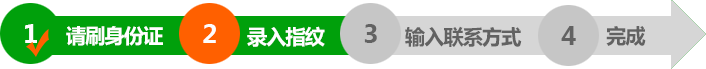
<style>
.page{position:relative;width:706px;height:69px;background:#ffffff}
.page>*{position:absolute;margin:0}
.t1{font:25px "MicrosoftYaHei-Bold";letter-spacing:-0.05em;color:#ffffff;text-transform:uppercase}
.t2{font:20.5px "MicrosoftYaHei-Bold";letter-spacing:-0.05em;color:#ffffff;text-transform:uppercase}
.t3{font:25px "MicrosoftYaHei-Bold";letter-spacing:-0.05em;color:#fdfdfd;text-transform:uppercase}
.t4{font:25px "MicrosoftYaHei-Bold";letter-spacing:-0.05em;color:#626262;text-transform:uppercase}
.t5{font:20.5px "MicrosoftYaHei-Bold";letter-spacing:-0.05em;color:#626262;text-transform:uppercase}
</style>
<div class="page">
<p class="t1" style="left:25px;top:24px;width:12px;height:19px">1</p>
<p class="t2" style="left:66px;top:26px;width:97px;height:20px">请刷身份证</p>
<p class="t3" style="left:203px;top:24px;width:13px;height:19px">2</p>
<p class="t2" style="left:247px;top:26px;width:78px;height:21px">录入指纹</p>
<p class="t4" style="left:364px;top:24px;width:13px;height:19px">3</p>
<p class="t5" style="left:405px;top:26px;width:117px;height:21px">输入联系方式</p>
<p class="t4" style="left:561px;top:26px;width:15px;height:19px">4</p>
<p class="t5" style="left:606px;top:26px;width:40px;height:20px">完成</p>
</div>
